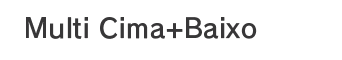
<style>
.page{position:relative;width:342px;height:60px;background:#ffffff}
.page>*{position:absolute;margin:0}
.t1{font:26.7px "RodinPro-DB";letter-spacing:0.008em;color:#383738}
</style>
<div class="page">
<p class="t1" style="left:26px;top:17px;width:231px;height:22px">Multi Cima+Baixo</p>
</div>
